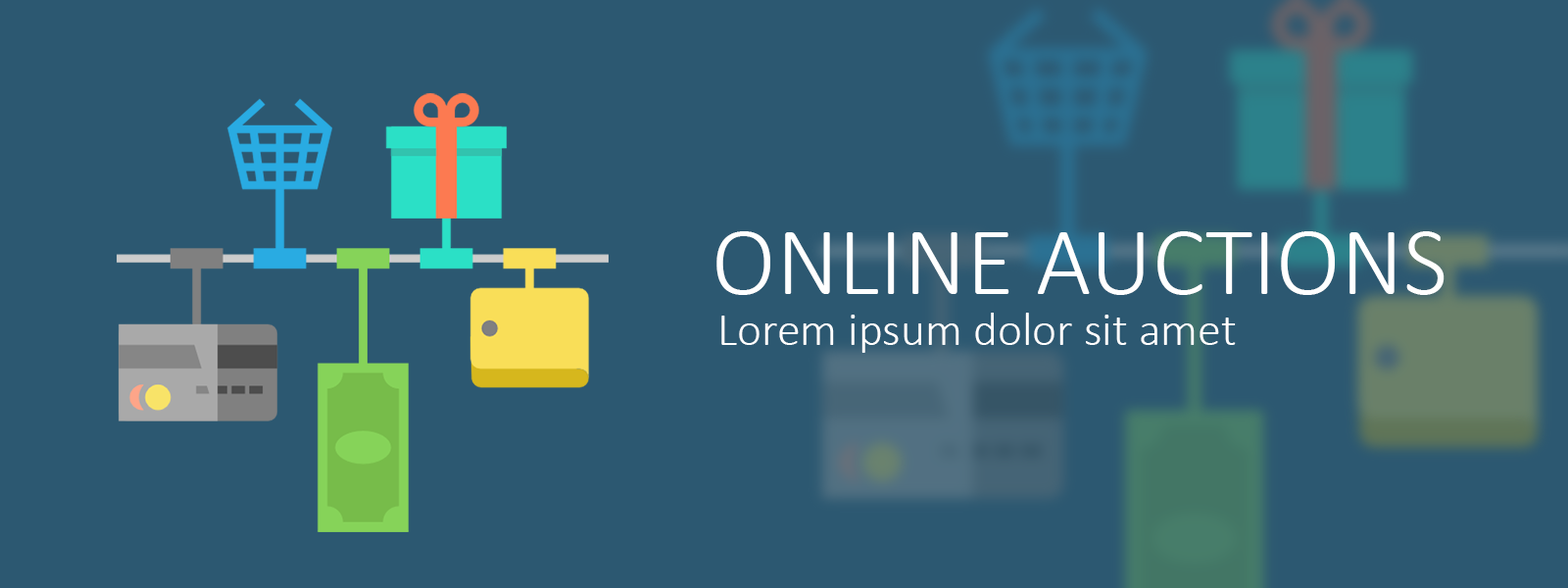
<style>
.page{position:relative;width:1568px;height:588px;background:#2c5871}
.page>*{position:absolute;margin:0}
.t1{font:98px "Calibri-Light";color:#ffffff}
.t2{font:47px "Calibri-Light";color:#ffffff}
</style>
<div class="page">
<p class="t1" style="left:716px;top:231px;width:729px;height:64px">ONLINE AUCTIONS</p>
<p class="t2" style="left:721px;top:313px;width:515px;height:40px">Lorem ipsum dolor sit amet</p>
</div>
